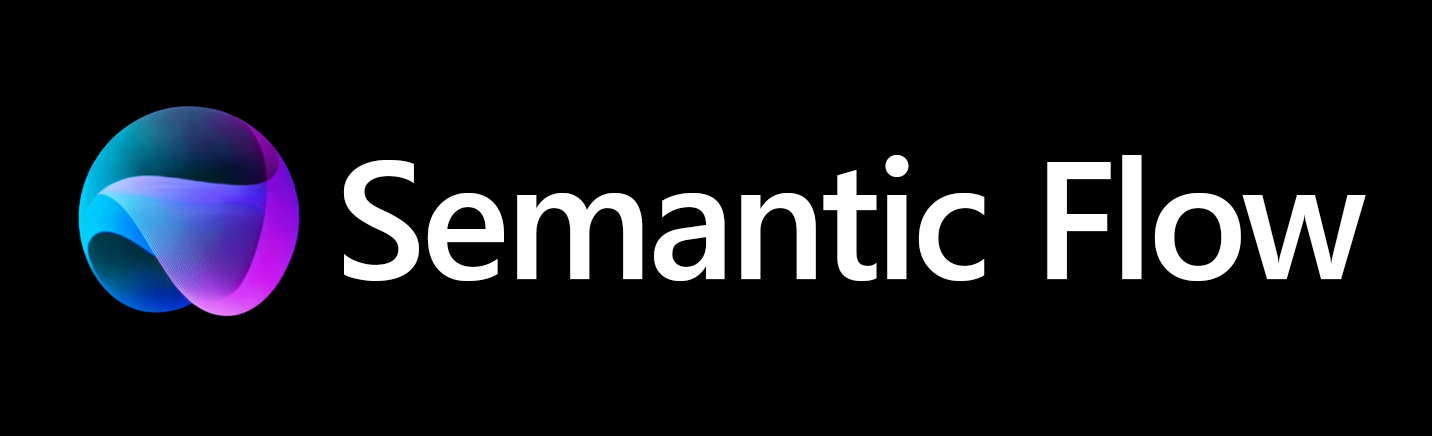
<style>
.page{position:relative;width:1432px;height:436px;background:#000000}
.page>*{position:absolute;margin:0}
.t1{font:166.7px "SegoeUI-Semibold";letter-spacing:-0.01em;color:#ffffff}
</style>
<div class="page">
<p class="t1" style="left:343px;top:155px;width:1023px;height:126px">Semantic Flow</p>
</div>
